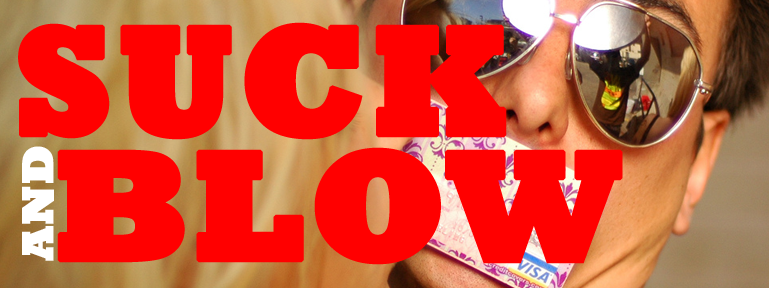
<style>
.page{position:relative;width:769px;height:288px;background:#ff0000}
.page>*{position:absolute;margin:0}
.t1{font:159.5px "Rockwell-ExtraBold";color:#ff0000;font-weight:bold}
.t2{font:45.6px "Rockwell-ExtraBold";color:#ffffff;font-weight:bold}
.t3{font:159.4px "Rockwell-ExtraBold";color:#ff0000;font-weight:bold}
</style>
<div class="page">
<p class="t1" style="left:18px;top:22px;width:489px;height:118px">SUCK</p>
<p class="t2" style="left:22px;top:146px;width:32px;height:115px;rotate:-90deg">AND</p>
<p class="t3" style="left:57px;top:147px;width:566px;height:118px">BLOW</p>
</div>
